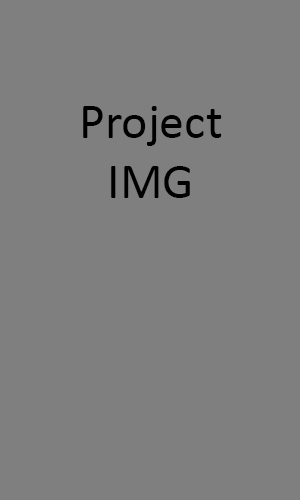
<style>
.page{position:relative;width:300px;height:500px;background:#7f7f7f}
.page>*{position:absolute;margin:0}
.t1{font:12px "Calibri";color:#000000}
</style>
<div class="page">
<p class="t1" style="left:83px;top:106px;width:139px;height:92px;text-align:center">Project IMG</p>
</div>
